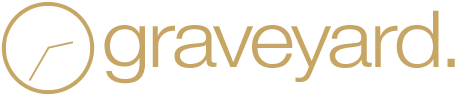
<style>
.page{position:relative;width:462px;height:96px;background:#ffffff}
.page>*{position:absolute;margin:0}
.t1{font:78.9px "HelveticaNeue-Light";letter-spacing:-0.015em;color:#c7a665;scale:1.11 1}
</style>
<div class="page">
<p class="t1" style="left:104px;top:10px;width:351px;height:74px">graveyard.</p>
</div>
